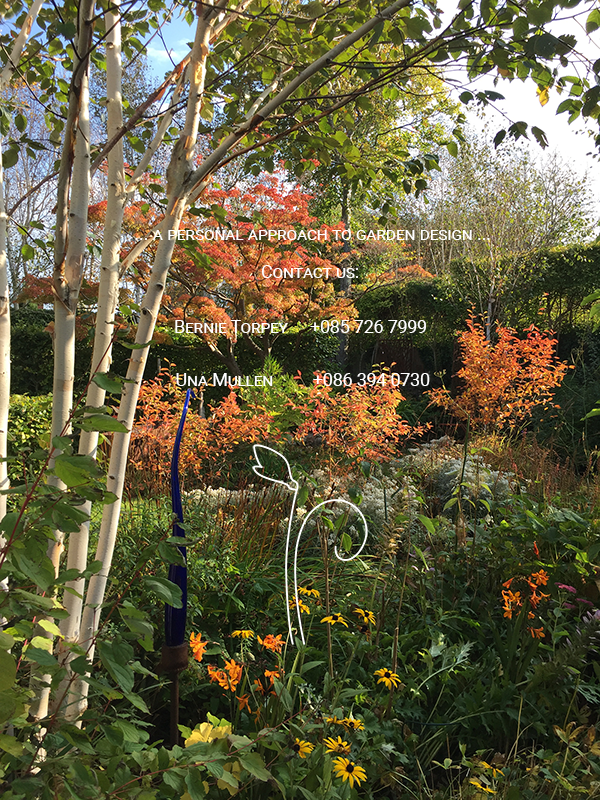
<style>
.page{position:relative;width:600px;height:800px}
.page>*{position:absolute;margin:0}
.t1{font:17.6px "Roboto-Regular";color:#ffffff;font-variant:small-caps}
</style>
<div class="page">
<p class="t1" style="left:135px;top:230px;width:355px;height:10px">... a personal approach to garden design ...</p>
<p class="t1" style="left:261px;top:265px;width:97px;height:13px">Contact us:</p>
<p class="t1" style="left:175px;top:320px;width:251px;height:13px">Bernie Torpey     +085 726 7999</p>
<p class="t1" style="left:176px;top:373px;width:254px;height:13px">Una Mullen         +086 394 0730</p>
</div>
